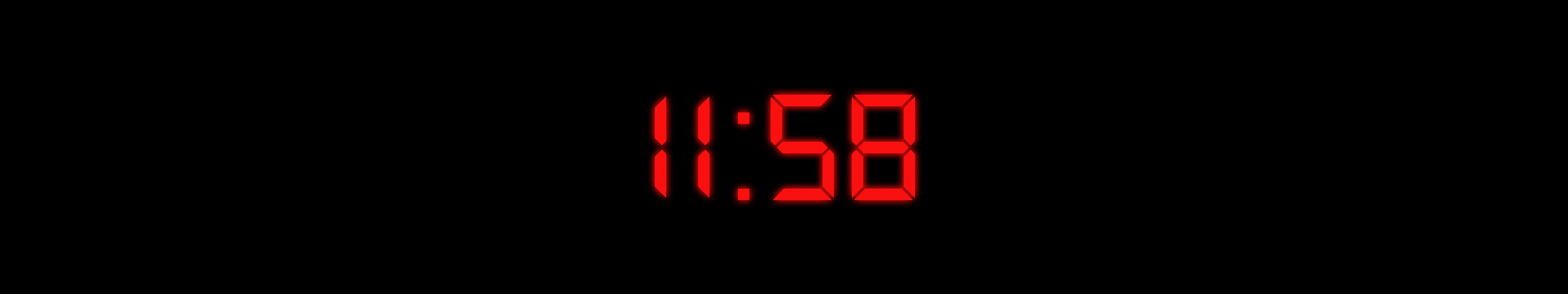
<style>
.page{position:relative;width:1568px;height:294px;background:#000000}
.page>*{position:absolute;margin:0}
.t1{font:165.7px "DS-Digital";color:#fb1010}
</style>
<div class="page">
<p class="t1" style="left:655px;top:95px;width:260px;height:105px">11:58</p>
</div>
